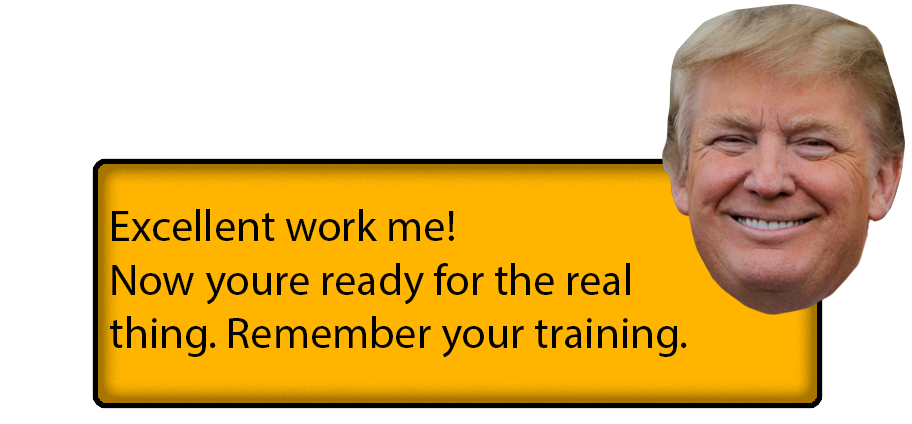
<style>
.page{position:relative;width:912px;height:424px;background:#ffffff}
.page>*{position:absolute;margin:0}
.t1{font:44.4px "MyriadPro-Regular";color:#000000}
</style>
<div class="page">
<p class="t1" style="left:110px;top:209px;width:577px;height:149px">Excellent work me! <br>Now youre ready for the real <br>thing. Remember your training.</p>
</div>
